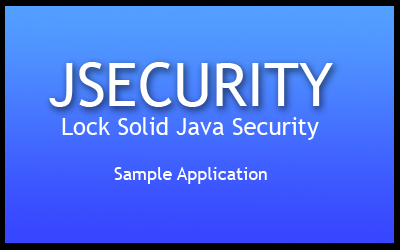
<style>
.page{position:relative;width:400px;height:250px}
.page>*{position:absolute;margin:0}
.t1{font:60px "TrebuchetMS";color:#ffffff}
.t2{font:24px "TrebuchetMS";color:#ffffff}
.t3{font:18px "TrebuchetMS";color:#ffffff}
</style>
<div class="page">
<p class="t1" style="left:49px;top:62px;width:284px;height:45px">JSECURITY</p>
<p class="t2" style="left:62px;top:117px;width:257px;height:23px">Lock Solid Java Security</p>
<p class="t3" style="left:114px;top:167px;width:153px;height:17px">Sample Application</p>
</div>
